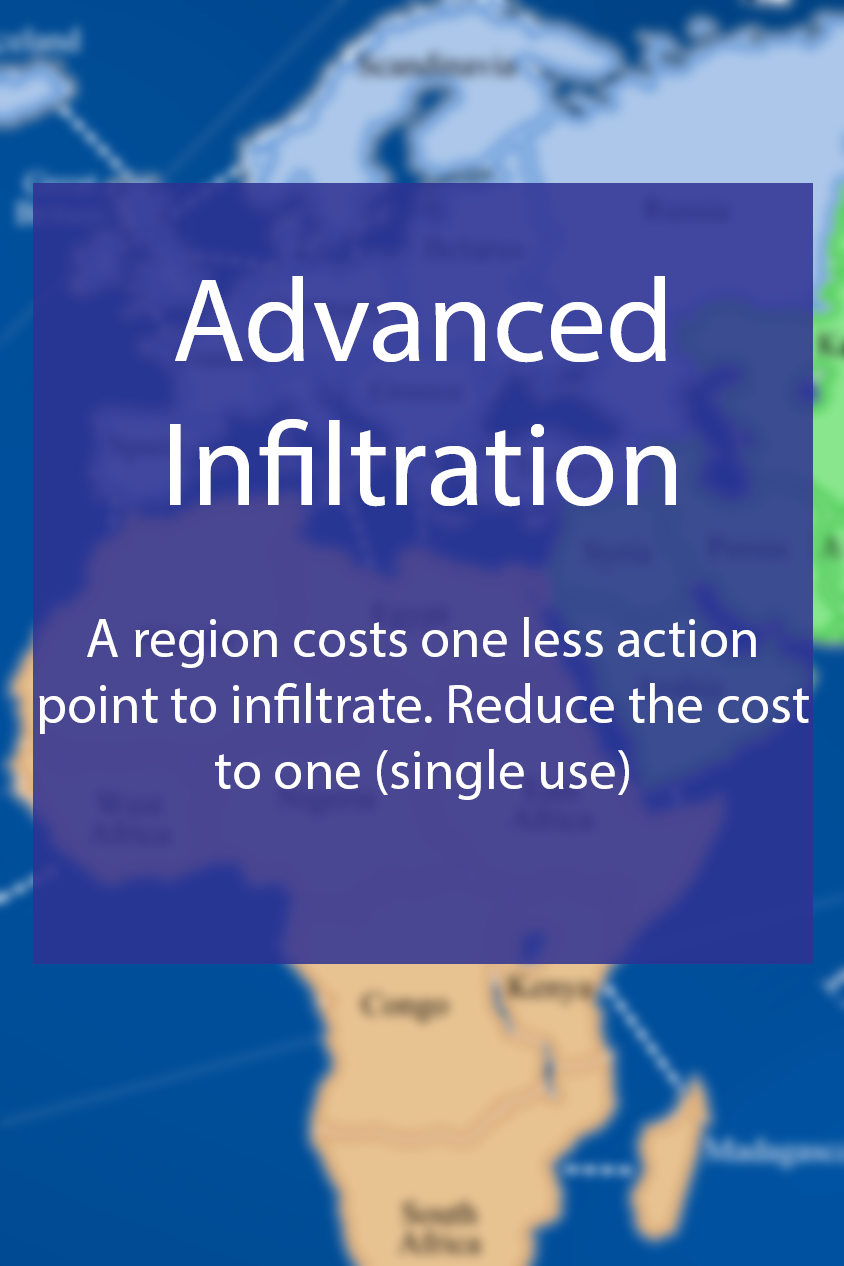
<style>
.page{position:relative;width:844px;height:1266px}
.page>*{position:absolute;margin:0}
.t1{font:55px "MyriadPro-Regular";color:#ffffff}
.t2{font:48px "MyriadPro-Regular";color:#ffffff}
.t3{font:120px "MyriadPro-Regular";color:#ffffff}
</style>
<div class="page">
<p class="t1" style="left:39px;top:276px;width:770px;height:524px;text-align:center"><span class="t2"><br></span><span class="t3">Advanced Infiltration<br><br><br><br></span>A region costs one less action point to infiltrate. Reduce the cost to one (single use)</p>
</div>
